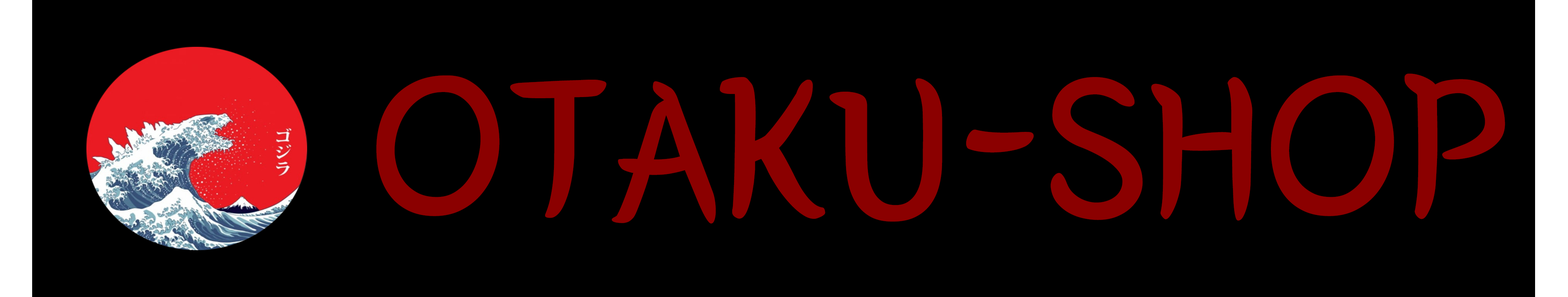
<style>
.page{position:relative;width:1568px;height:297px;background:#000000}
.page>*{position:absolute;margin:0}
.t1{font:213px "YeonSung-Regular";color:#8b0000;text-transform:uppercase}
</style>
<div class="page">
<p class="t1" style="left:376px;top:74px;width:1129px;height:150px">Otaku-shop</p>
</div>
